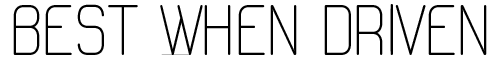
<style>
.page{position:relative;width:500px;height:60px;background:#ffffff}
.page>*{position:absolute;margin:0}
.t1{font:72px "ACLine";color:#000000}
</style>
<div class="page">
<p class="t1" style="left:13px;top:4px;width:474px;height:51px">Best When Driven</p>
</div>
